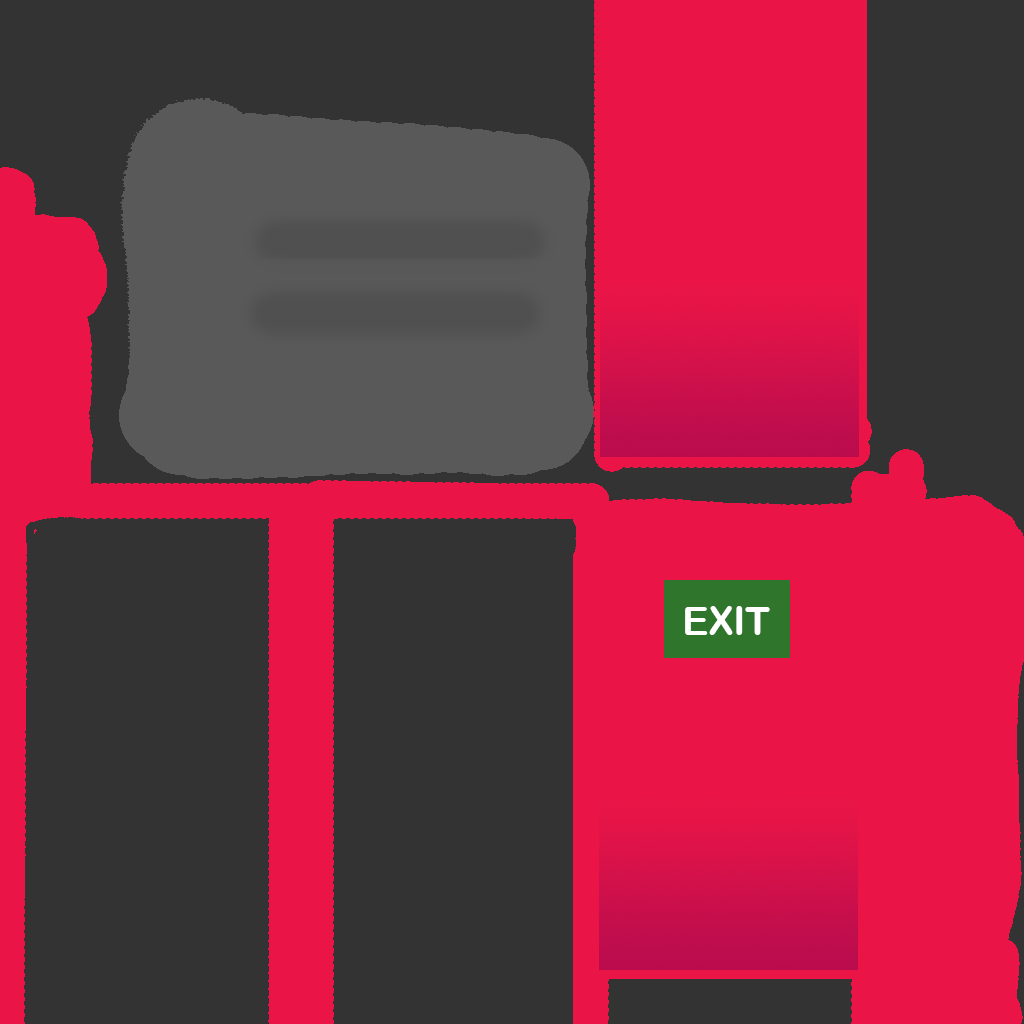
<style>
.page{position:relative;width:1024px;height:1024px;background:#333333}
.page>*{position:absolute;margin:0}
.t1{font:40px "ArialRoundedMTBold";color:#ffffff}
</style>
<div class="page">
<p class="t1" style="left:685px;top:606px;width:85px;height:29px">EXIT</p>
</div>
